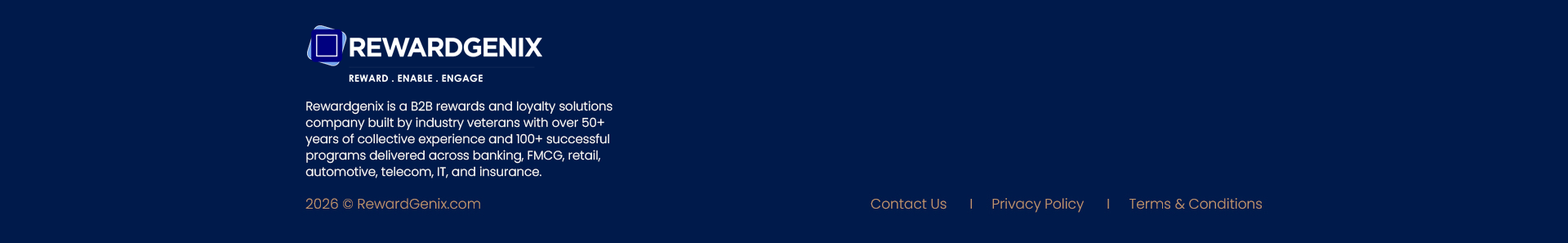
<style>
.page{position:relative;width:1568px;height:243px;background:#001a4b}
.page>*{position:absolute;margin:0}
.t1{font:12.2px/16.3px "Poppins-Light";color:#ffffff}
</style>
<div class="page">
<p class="t1" style="left:305px;top:100px;width:307px;height:78px">Rewardgenix is a B2B rewards and loyalty solutions company built by industry veterans with over 50+ years of collective experience and 100+ successful programs delivered across banking, FMCG, retail, automotive, telecom, IT, and insurance.</p>
</div>
